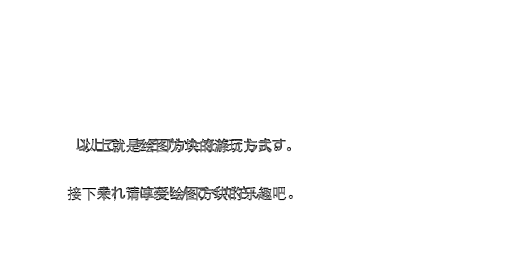
<style>
.page{position:relative;width:512px;height:256px;background:#ffffff}
.page>*{position:absolute;margin:0}
.t1{font:14.7px/24px "DFPHeiW5-GB"}
</style>
<div class="page">
<p class="t1" style="left:67px;top:138px;width:226px;height:63px;text-align:center">以上就是绘图方块的游玩方式。<br><br>接下来，请享受绘图方块的乐趣吧。</p>
</div>
